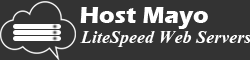
<style>
.page{position:relative;width:250px;height:60px;background:#333333}
.page>*{position:absolute;margin:0}
.t1{font:24px "ErasITC-Bold";color:#ffffff}
.t2{font:22.4px "Aparajita-BoldItalic";color:#fefefe}
</style>
<div class="page">
<p class="t1" style="left:80px;top:7px;width:128px;height:22px">Host Mayo</p>
<p class="t2" style="left:80px;top:31px;width:171px;height:16px">LiteSpeed Web Servers</p>
</div>
